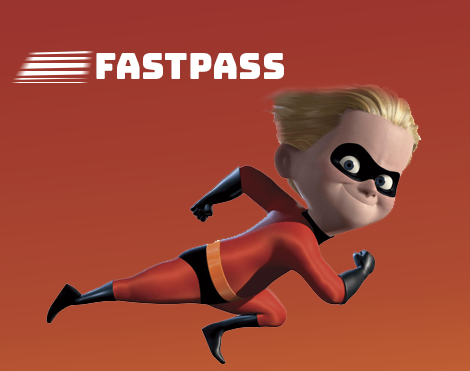
<style>
.page{position:relative;width:470px;height:371px}
.page>*{position:absolute;margin:0}
.t1{font:36px "Bungee-Regular";color:#ffffff}
</style>
<div class="page">
<p class="t1" style="left:96px;top:53px;width:188px;height:26px">FASTPASS</p>
</div>
